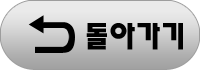
<style>
.page{position:relative;width:200px;height:70px}
.page>*{position:absolute;margin:0}
.t1{font:30px "HaanYHeadB";color:#000000}
</style>
<div class="page">
<p class="t1" style="left:86px;top:23px;width:97px;height:27px">돌아가기</p>
</div>
